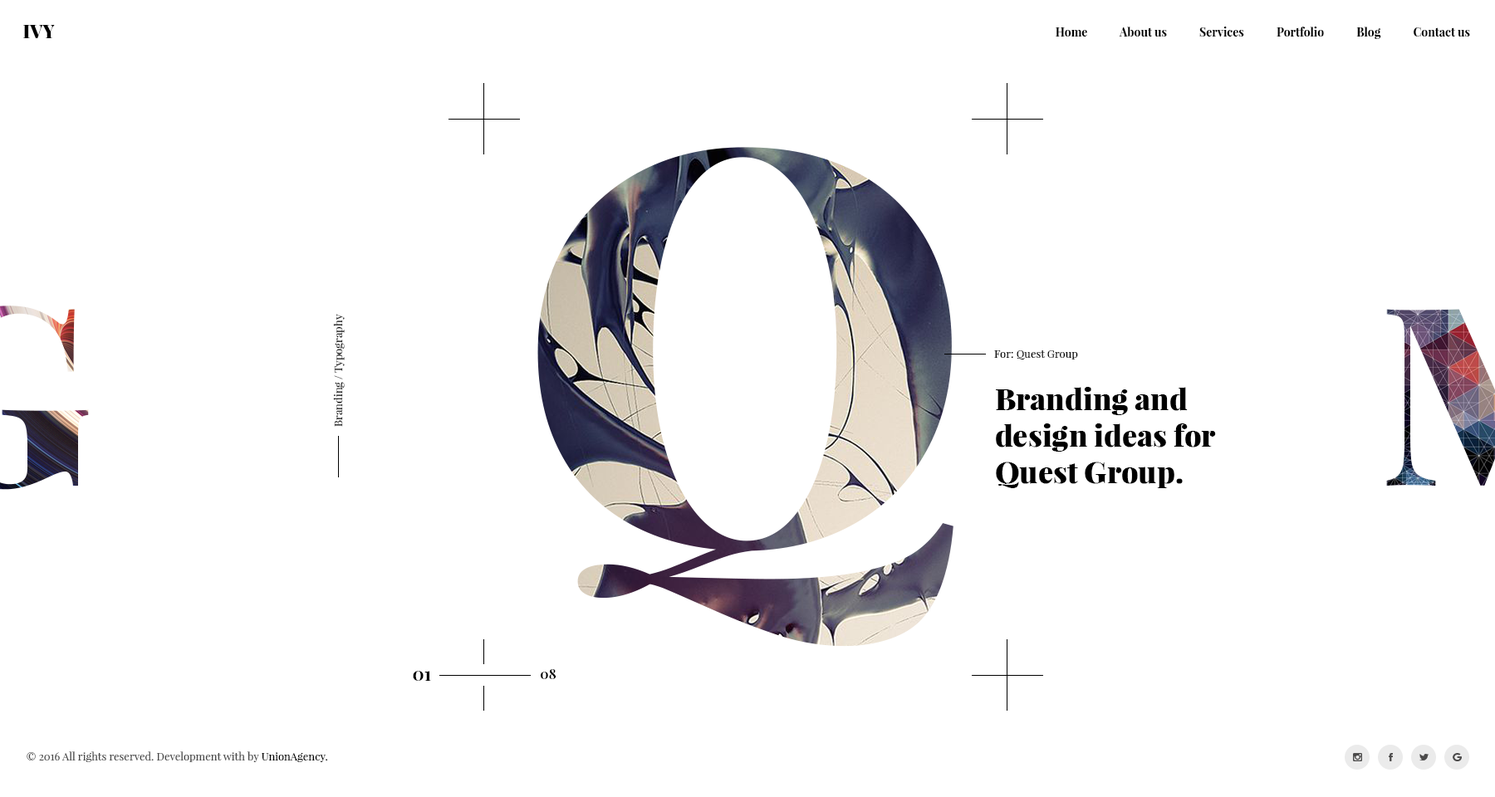
<style>
.page{position:relative;width:1495px;height:797px;background:#ffffff}
.page>*{position:absolute;margin:0}
.t1{font:18.3px "PlayfairDisplay-Black";color:#000000}
.t2{font:11.6px "PlayfairDisplay-Bold";color:#000000}
.t3{font:10.6px "PlayfairDisplay-Regular";color:#000000}
.t4{font:10.8px "PlayfairDisplay-Regular";color:#000000}
.t5{font:29.9px/36.6px "PlayfairDisplay-Black";color:#000000}
.t6{font:18.2px "PlayfairDisplay-Bold";color:#000000}
.t7{font:13.2px "PlayfairDisplay-Bold";color:#000000}
.t8{font:10.8px "PlayfairDisplay-Regular";color:#494949}
</style>
<div class="page">
<p class="t1" style="left:23px;top:25px;width:32px;height:13px">IVY</p>
<p class="t2" style="left:1056px;top:27px;width:414px;height:12px">Home            About us            Services            Portfolio            Blog            Contact us</p>
<p class="t3" style="left:333px;top:314px;width:12px;height:113px;rotate:-90deg">Branding / Typography</p>
<p class="t4" style="left:994px;top:351px;width:84px;height:9px">For: Quest Group</p>
<p class="t5" style="left:996px;top:387px;width:220px;height:101px">Branding and <br>design ideas for <br>Quest Group.</p>
<p class="t6" style="left:413px;top:671px;width:18px;height:10px">01</p>
<p class="t7" style="left:541px;top:670px;width:16px;height:10px">08</p>
<p class="t8" style="left:27px;top:752px;width:301px;height:11px">© 2016 All rights reserved. Development with by <span class="t4">UnionAgency.</span></p>
</div>
